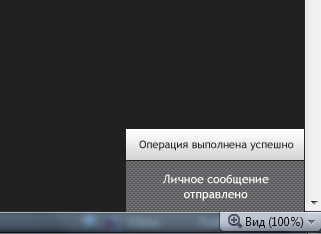
<style>
.page{position:relative;width:321px;height:234px;background:#212121}
.page>*{position:absolute;margin:0}
.t1{font:11px "TrebuchetMS";color:#212121}
.t2{font:12px/15px "TrebuchetMS";color:#ffffff}
</style>
<div class="page">
<p class="t1" style="left:139px;top:140px;width:155px;height:11px">Операция выполнена успешно</p>
<p class="t2" style="left:162px;top:174px;width:107px;height:27px;text-align:center">Личное сообщение<br>отправлено</p>
</div>
